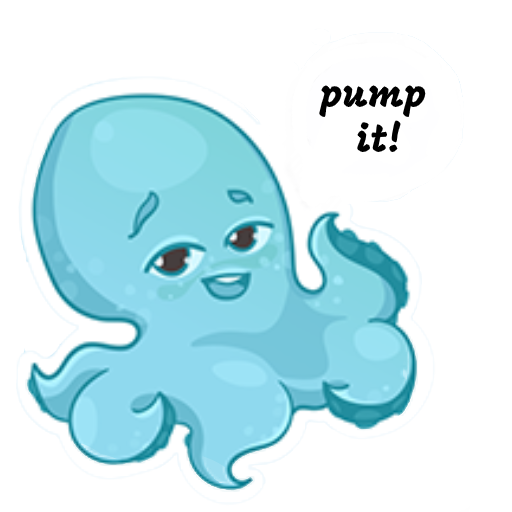
<style>
.page{position:relative;width:512px;height:512px;background:#ffffff}
.page>*{position:absolute;margin:0}
.t1{font:38px "Mogra-Regular";color:#000000}
</style>
<div class="page">
<p class="t1" style="left:319px;top:85px;width:107px;height:67px;text-align:center">pump <br>it!</p>
</div>
